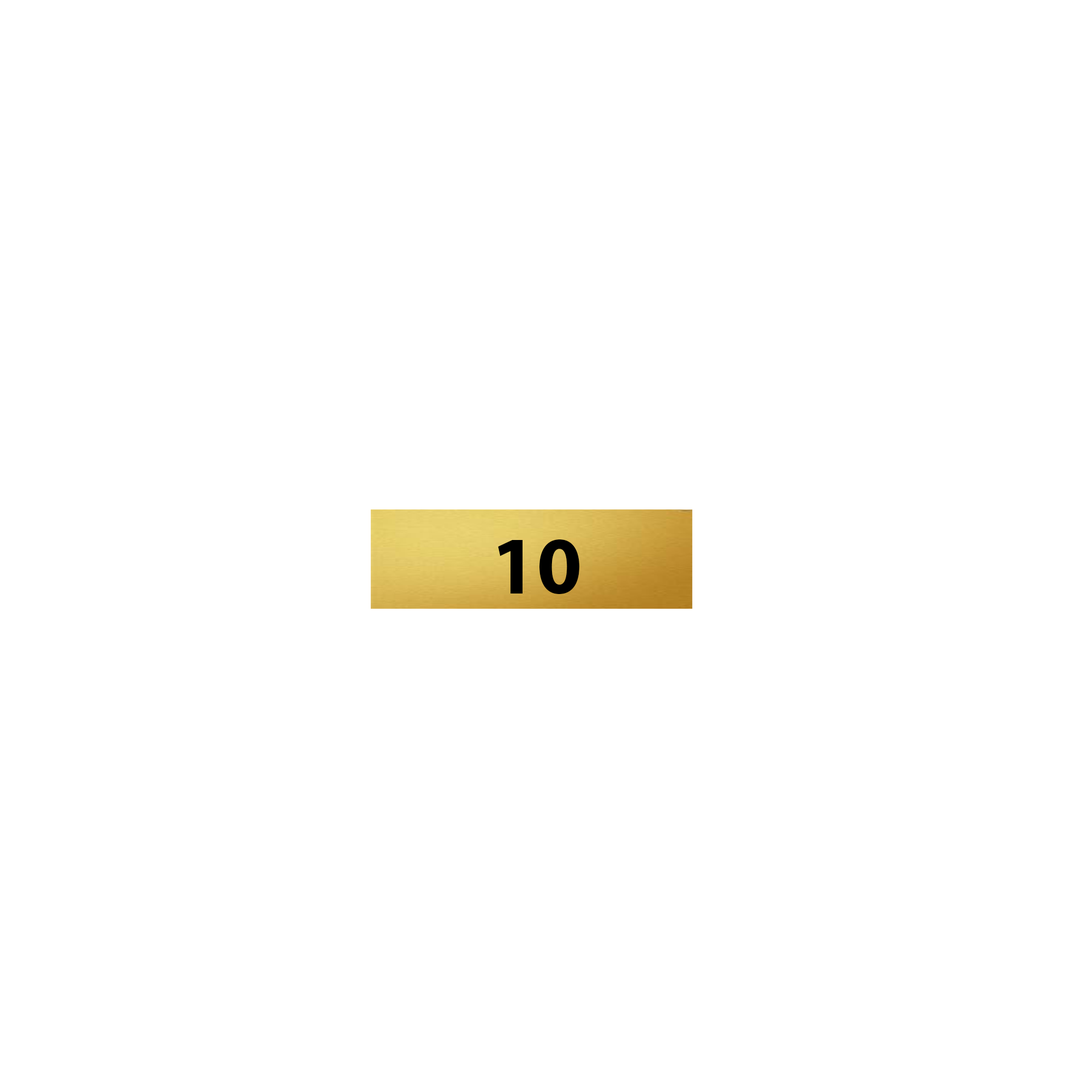
<style>
.page{position:relative;width:1092px;height:1092px;background:#ffffff}
.page>*{position:absolute;margin:0}
.t1{font:81.9px "MyriadPro-Bold";color:#000000}
</style>
<div class="page">
<p class="t1" style="left:498px;top:539px;width:81px;height:55px">10</p>
</div>
